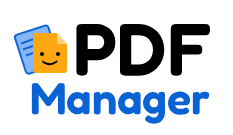
<style>
.page{position:relative;width:233px;height:135px;background:#ffffff}
.page>*{position:absolute;margin:0}
.t1{font:74px "Fredoka-SemiBold";color:#000000}
.t2{font:45px "Fredoka-SemiBold";color:#0a63d4}
</style>
<div class="page">
<p class="t1" style="left:76px;top:23px;width:135px;height:53px">PDF</p>
<p class="t2" style="left:31px;top:83px;width:179px;height:41px">Manager</p>
</div>
